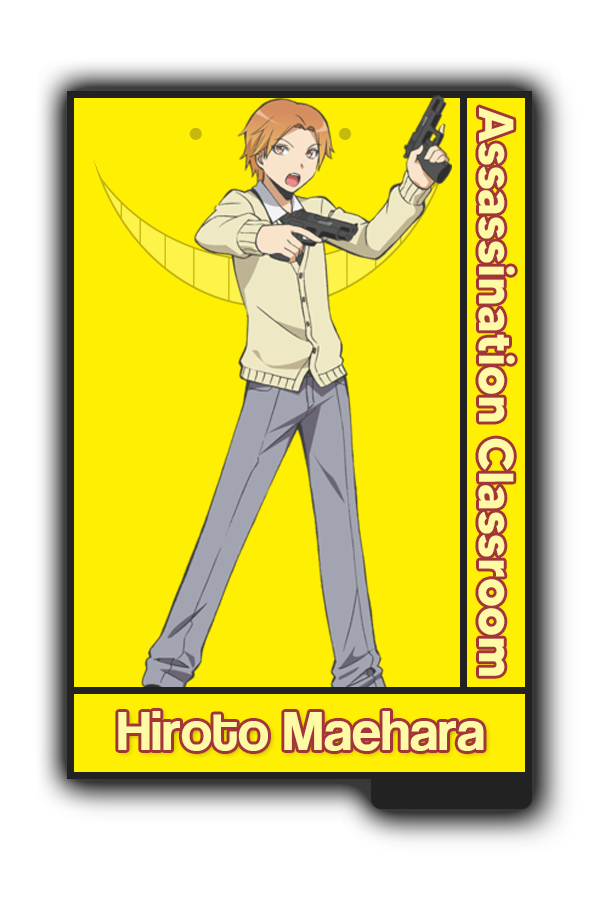
<style>
.page{position:relative;width:600px;height:900px;background:#ffef03}
.page>*{position:absolute;margin:0}
.t1{font:48.8px "MADETOMMY-Bold";color:#fefaa5}
.t2{font:57.8px "CoolveticaRg-Regular";color:#fefaa5}
</style>
<div class="page">
<p class="t1" style="left:478px;top:107px;width:37px;height:569px;rotate:90deg">Assassination Classroom</p>
<p class="t2" style="left:118px;top:711px;width:366px;height:40px">Hiroto Maehara</p>
</div>
